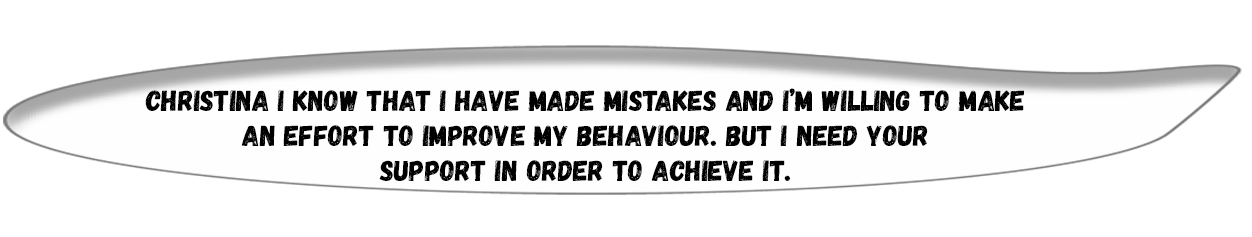
<style>
.page{position:relative;width:1252px;height:237px;background:#ffffff}
.page>*{position:absolute;margin:0}
.t1{font:29.3px "Gagalin-Regular";color:#000000}
</style>
<div class="page">
<p class="t1" style="left:145px;top:88px;width:879px;height:93px;text-align:center">Christina I know that I have made mistakes and I’m willing to make <br>an effort to improve my behaviour. But I need your <br>support in order to achieve it.</p>
</div>
